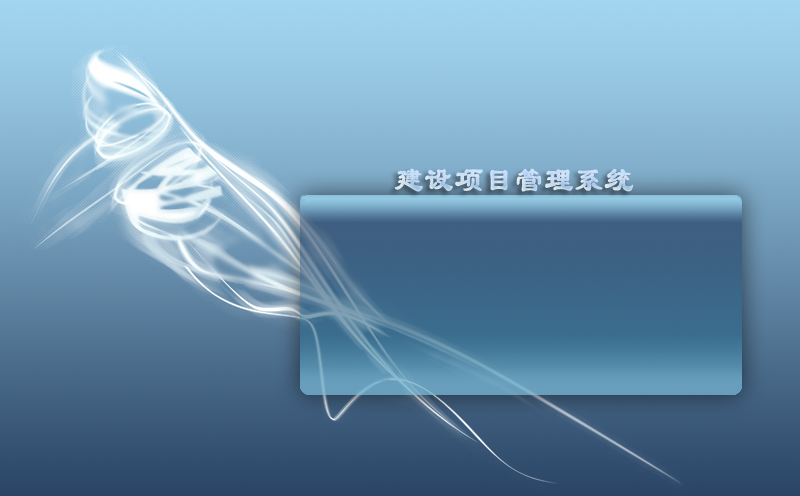
<style>
.page{position:relative;width:800px;height:496px}
.page>*{position:absolute;margin:0}
.t1{font:30px "JFangLi";color:#d5e3ec}
</style>
<div class="page">
<p class="t1" style="left:394px;top:168px;width:240px;height:24px">建设项目管理系统</p>
</div>
